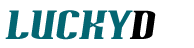
<style>
.page{position:relative;width:194px;height:48px;background:#ffffff}
.page>*{position:absolute;margin:0}
.t1{font:35.6px "Arnprior";color:#036672}
.t2{font:35.6px "Arnprior";color:#000000}
</style>
<div class="page">
<p class="t1" style="left:5px;top:10px;width:151px;height:30px">LUCKY<span class="t2">D</span></p>
</div>
